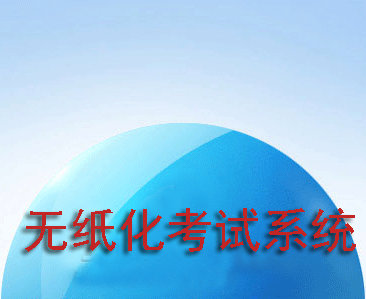
<style>
.page{position:relative;width:366px;height:299px}
.page>*{position:absolute;margin:0}
.t1{font:48px "SimHei";color:#c32525}
</style>
<div class="page">
<p class="t1" style="left:25px;top:208px;width:331px;height:44px">无纸化考试系统</p>
</div>
